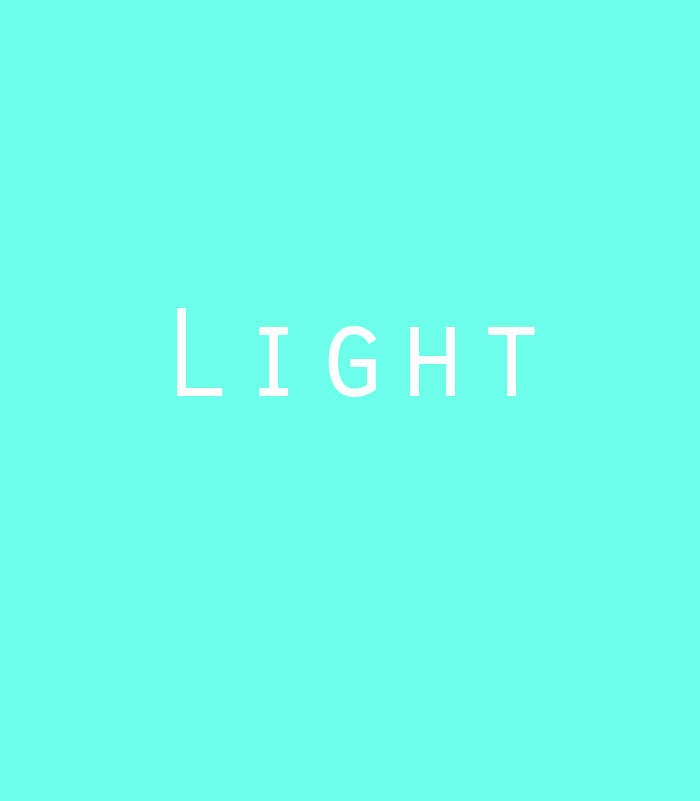
<style>
.page{position:relative;width:700px;height:801px;background:#6cffea}
.page>*{position:absolute;margin:0}
.t1{font:132px "OratorStd";color:#ffffff}
</style>
<div class="page">
<p class="t1" style="left:177px;top:308px;width:358px;height:89px">Light</p>
</div>
